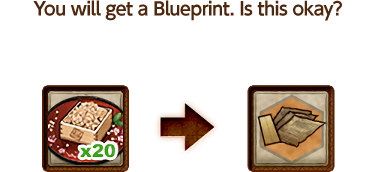
<style>
.page{position:relative;width:375px;height:172px;background:#ffffff}
.page>*{position:absolute;margin:0}
.t1{font:18px "UDShinGoPro-DeBold";letter-spacing:-0.04em;color:#50260d}
</style>
<div class="page">
<p class="t1" style="left:33px;top:0px;width:309px;height:21px">You will get a Blueprint. Is this okay?</p>
</div>
